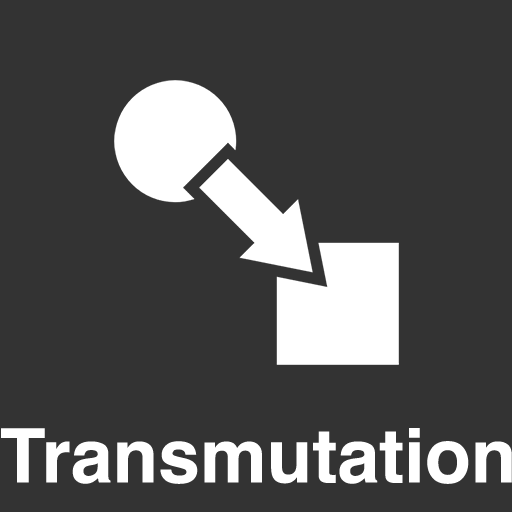
<style>
.page{position:relative;width:512px;height:512px;background:#333333}
.page>*{position:absolute;margin:0}
.t1{font:75px "Helvetica-Bold";color:#ffffff}
</style>
<div class="page">
<p class="t1" style="left:1px;top:428px;width:511px;height:56px">Transmutation</p>
</div>
